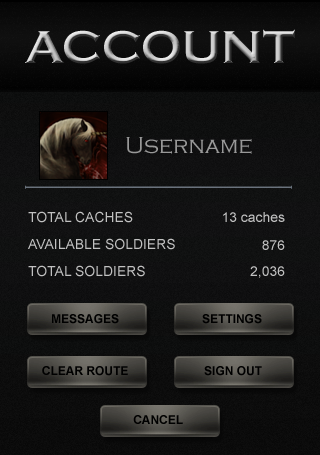
<style>
.page{position:relative;width:320px;height:455px}
.page>*{position:absolute;margin:0}
.t1{font:47.8px "CopperplateGothic-Bold"}
.t2{font:23.9px "CopperplateGothic-Light";color:#989898}
.t3{font:13.9px "ArialMT";color:#c1c1c1}
.t4{font:12px "Arial-BoldMT";color:#000000}
</style>
<div class="page">
<p class="t1" style="left:25px;top:29px;width:270px;height:35px">ACCOUNT</p>
<p class="t2" style="left:126px;top:137px;width:126px;height:17px">Username</p>
<p class="t3" style="left:28px;top:211px;width:105px;height:12px">TOTAL CACHES</p>
<p class="t3" style="left:223px;top:212px;width:62px;height:10px">13 caches</p>
<p class="t3" style="left:28px;top:238px;width:147px;height:12px">AVAILABLE SOLDIERS</p>
<p class="t3" style="left:262px;top:240px;width:23px;height:10px">876</p>
<p class="t3" style="left:28px;top:265px;width:117px;height:12px">TOTAL SOLDIERS</p>
<p class="t3" style="left:250px;top:266px;width:35px;height:12px">2,036</p>
<p class="t4" style="left:52px;top:314px;width:67px;height:10px">MESSAGES</p>
<p class="t4" style="left:202px;top:314px;width:60px;height:10px">SETTINGS</p>
<p class="t4" style="left:42px;top:366px;width:86px;height:10px">CLEAR ROUTE</p>
<p class="t4" style="left:204px;top:366px;width:58px;height:10px">SIGN OUT</p>
<p class="t4" style="left:133px;top:415px;width:50px;height:9px">CANCEL</p>
</div>
